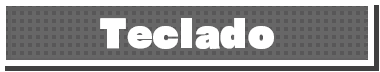
<style>
.page{position:relative;width:380px;height:72px;background:#676767}
.page>*{position:absolute;margin:0}
.t1{font:36px "RaglanPunchStd-UB";letter-spacing:0.027em;color:#ffffff}
</style>
<div class="page">
<p class="t1" style="left:100px;top:18px;width:174px;height:31px">Teclado</p>
</div>
